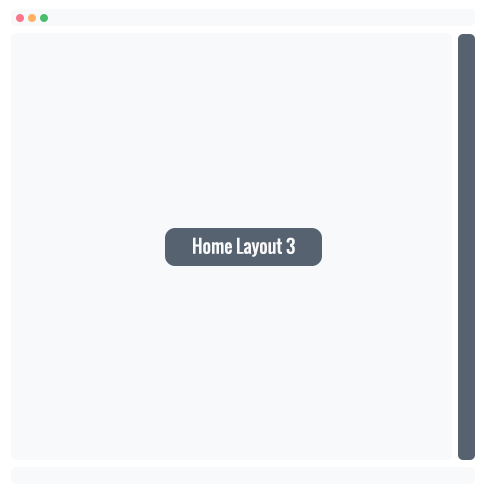
<style>
.page{position:relative;width:486px;height:493px;background:#f8f9fb}
.page>*{position:absolute;margin:0}
.t1{font:18px "Oswald-Regular";color:#f8f9fb}
</style>
<div class="page">
<p class="t1" style="left:193px;top:237px;width:102px;height:20px">Home Layout 3</p>
</div>
